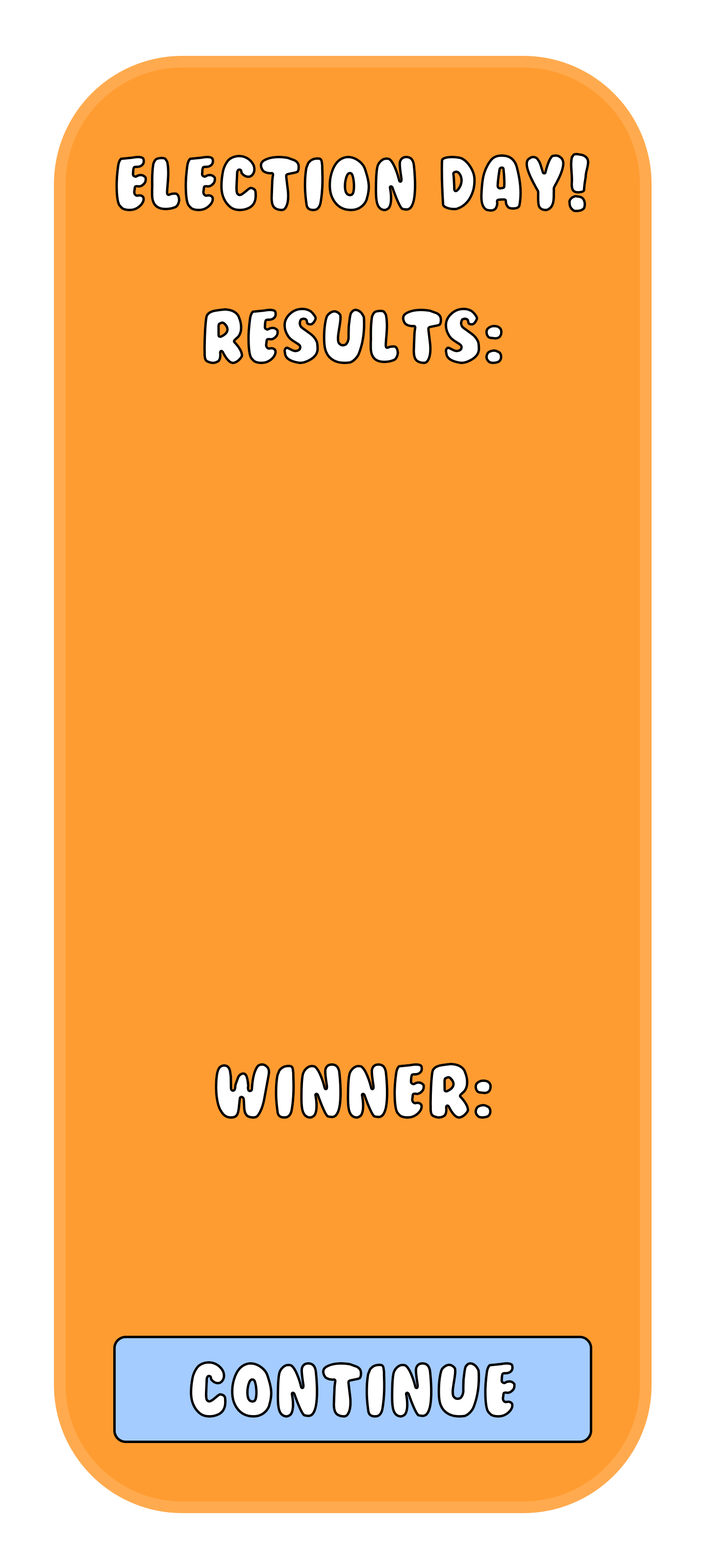
<style>
.page{position:relative;width:706px;height:1568px;background:#ff9c31}
.page>*{position:absolute;margin:0}
.t1{font:71.5px "BubbleGum";color:#ffffff}
</style>
<div class="page">
<p class="t1" style="left:115px;top:153px;width:474px;height:59px">Election Day!</p>
<p class="t1" style="left:203px;top:308px;width:300px;height:57px">Results:</p>
<p class="t1" style="left:215px;top:1063px;width:277px;height:56px">Winner:</p>
</div>
